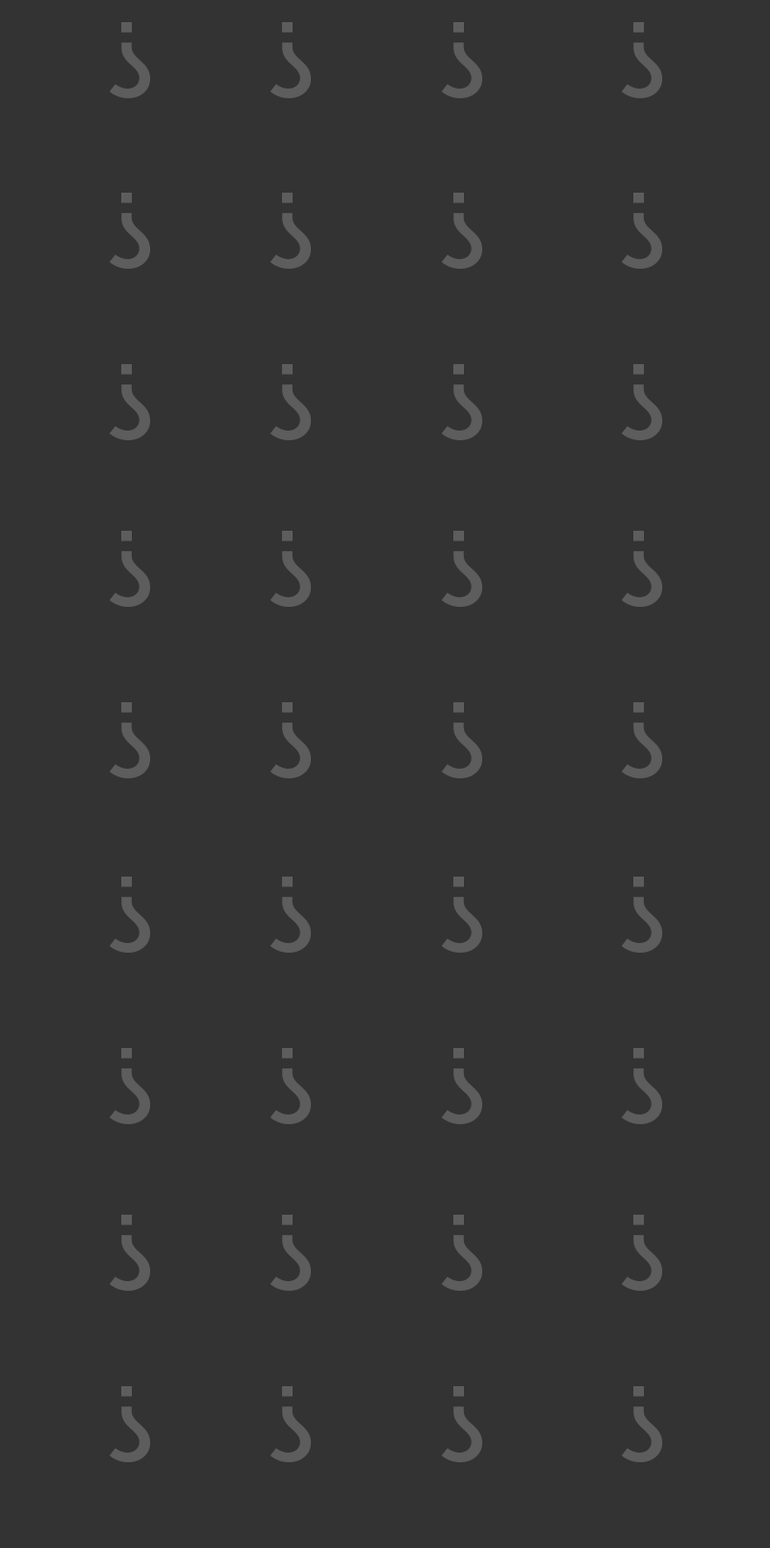
<style>
.page{position:relative;width:770px;height:1548px;background:#333333}
.page>*{position:absolute;margin:0}
.t1{font:105.1px "MuseoSans-500";color:#5d5d5d}
</style>
<div class="page">
<p class="t1" style="left:109px;top:22px;width:41px;height:76px">?</p>
<p class="t1" style="left:270px;top:22px;width:41px;height:76px">?</p>
<p class="t1" style="left:441px;top:22px;width:42px;height:76px">?</p>
<p class="t1" style="left:621px;top:22px;width:42px;height:76px">?</p>
<p class="t1" style="left:109px;top:193px;width:41px;height:76px">?</p>
<p class="t1" style="left:270px;top:193px;width:41px;height:76px">?</p>
<p class="t1" style="left:441px;top:193px;width:42px;height:76px">?</p>
<p class="t1" style="left:621px;top:193px;width:42px;height:76px">?</p>
<p class="t1" style="left:109px;top:364px;width:41px;height:76px">?</p>
<p class="t1" style="left:270px;top:364px;width:41px;height:76px">?</p>
<p class="t1" style="left:441px;top:364px;width:42px;height:76px">?</p>
<p class="t1" style="left:621px;top:364px;width:42px;height:76px">?</p>
<p class="t1" style="left:109px;top:531px;width:41px;height:76px">?</p>
<p class="t1" style="left:270px;top:531px;width:41px;height:76px">?</p>
<p class="t1" style="left:441px;top:531px;width:42px;height:76px">?</p>
<p class="t1" style="left:621px;top:531px;width:42px;height:76px">?</p>
<p class="t1" style="left:109px;top:702px;width:41px;height:76px">?</p>
<p class="t1" style="left:270px;top:702px;width:41px;height:76px">?</p>
<p class="t1" style="left:441px;top:702px;width:42px;height:76px">?</p>
<p class="t1" style="left:621px;top:702px;width:42px;height:76px">?</p>
<p class="t1" style="left:109px;top:876px;width:41px;height:76px">?</p>
<p class="t1" style="left:270px;top:876px;width:41px;height:76px">?</p>
<p class="t1" style="left:441px;top:876px;width:42px;height:76px">?</p>
<p class="t1" style="left:621px;top:876px;width:42px;height:76px">?</p>
<p class="t1" style="left:109px;top:1048px;width:41px;height:76px">?</p>
<p class="t1" style="left:270px;top:1048px;width:41px;height:76px">?</p>
<p class="t1" style="left:441px;top:1048px;width:42px;height:76px">?</p>
<p class="t1" style="left:621px;top:1048px;width:42px;height:76px">?</p>
<p class="t1" style="left:109px;top:1214px;width:41px;height:77px">?</p>
<p class="t1" style="left:270px;top:1214px;width:41px;height:77px">?</p>
<p class="t1" style="left:441px;top:1214px;width:42px;height:77px">?</p>
<p class="t1" style="left:621px;top:1214px;width:42px;height:77px">?</p>
<p class="t1" style="left:109px;top:1386px;width:41px;height:76px">?</p>
<p class="t1" style="left:270px;top:1386px;width:41px;height:76px">?</p>
<p class="t1" style="left:441px;top:1386px;width:42px;height:76px">?</p>
<p class="t1" style="left:621px;top:1386px;width:42px;height:76px">?</p>
</div>
